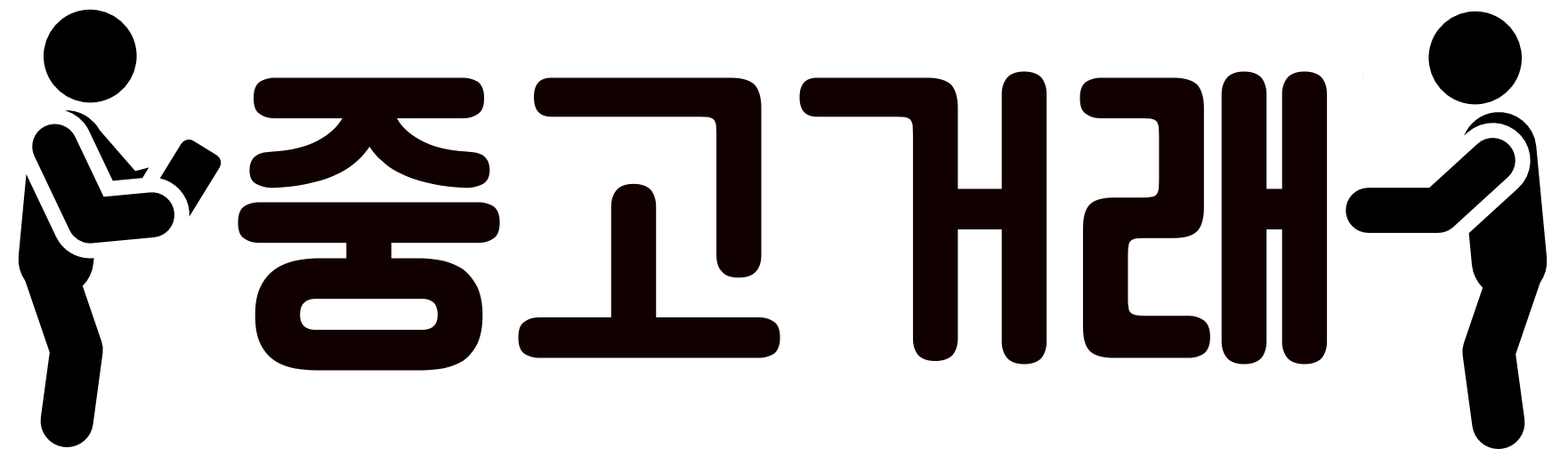
<style>
.page{position:relative;width:1568px;height:449px;background:#ffffff}
.page>*{position:absolute;margin:0}
.t1{font:311.5px "OTChungchunsidaeR";color:#110000}
</style>
<div class="page">
<p class="t1" style="left:238px;top:71px;width:1090px;height:300px">중고거래</p>
</div>
